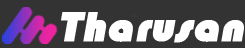
<style>
.page{position:relative;width:245px;height:48px;background:#333333}
.page>*{position:absolute;margin:0}
.t1{font:44.4px "Bauhaus93";color:#ffffff;font-weight:bold;font-style:italic}
</style>
<div class="page">
<p class="t1" style="left:61px;top:12px;width:183px;height:31px">Tharusan</p>
</div>
